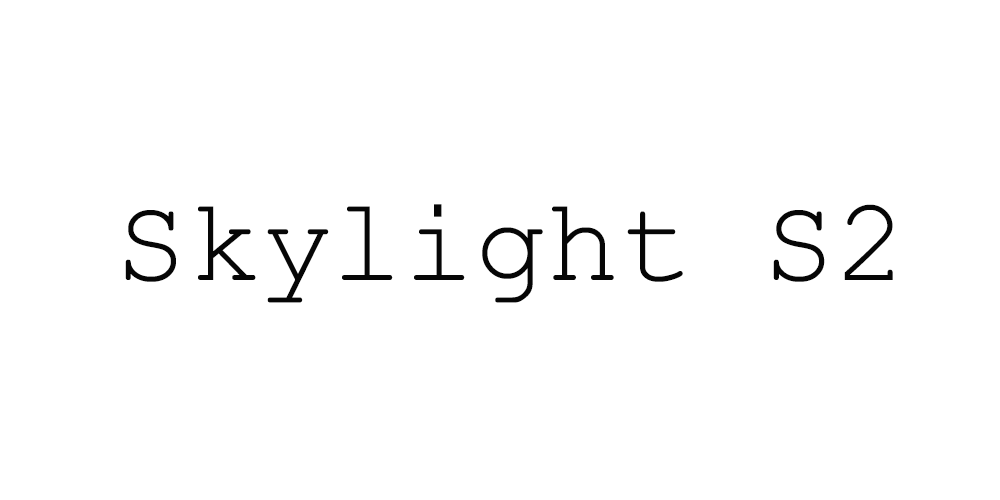
<style>
.page{position:relative;width:1000px;height:500px;background:#ffffff}
.page>*{position:absolute;margin:0}
.t1{font:120px "CourierNewPSMT";color:#060606}
</style>
<div class="page">
<p class="t1" style="left:125px;top:204px;width:768px;height:99px">Skylight S2</p>
</div>
